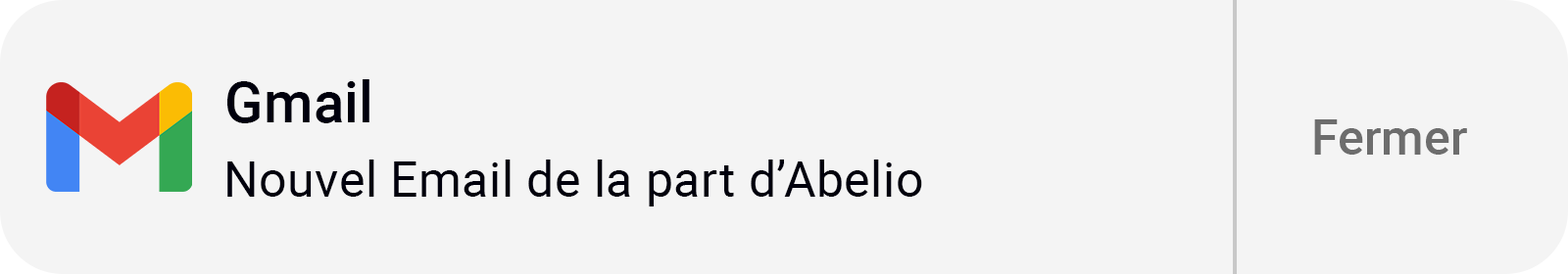
<style>
.page{position:relative;width:1568px;height:274px;background:#f4f4f4}
.page>*{position:absolute;margin:0}
.t1{font:57.2px "Roboto-Medium";color:#00000d}
.t2{font:49px "Roboto-Medium";color:#6d6d6d}
.t3{font:49px "Roboto-Regular";letter-spacing:0.01em;color:#00000d}
</style>
<div class="page">
<p class="t1" style="left:227px;top:79px;width:142px;height:44px">Gmail</p>
<p class="t2" style="left:1314px;top:120px;width:153px;height:35px">Fermer</p>
<p class="t3" style="left:227px;top:160px;width:695px;height:47px">Nouvel Email de la part d’Abelio</p>
</div>
